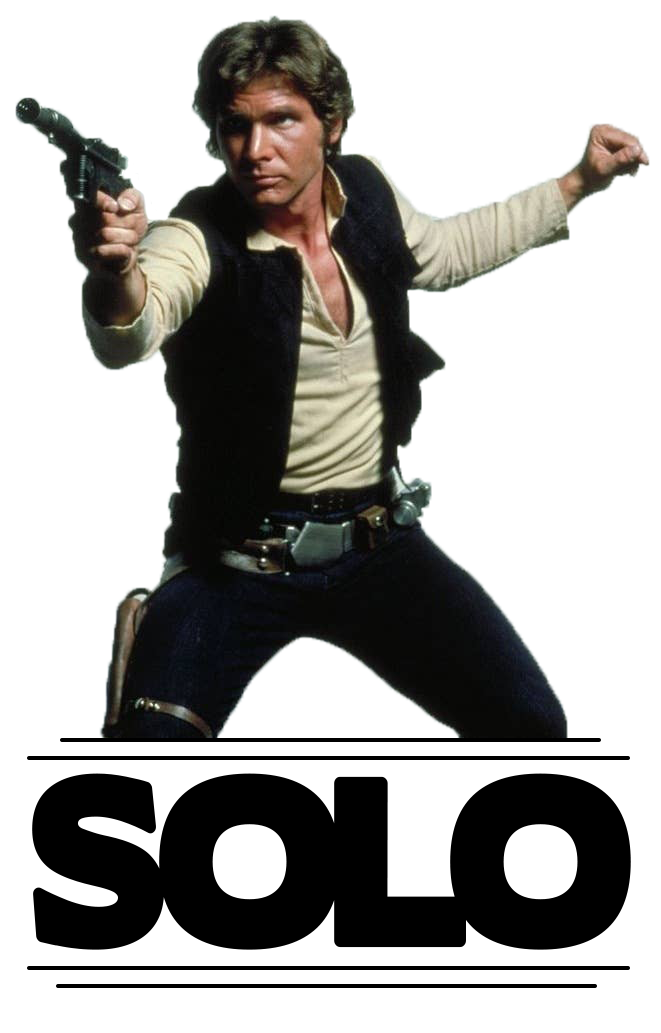
<style>
.page{position:relative;width:661px;height:1033px;background:#ffffff}
.page>*{position:absolute;margin:0}
.t1{font:217.5px "BorisBlackBloxx";letter-spacing:-0.07em;color:#000000;text-transform:uppercase;scale:0.88 1}
</style>
<div class="page">
<p class="t1" style="left:32px;top:773px;width:599px;height:177px">SOLO</p>
</div>
